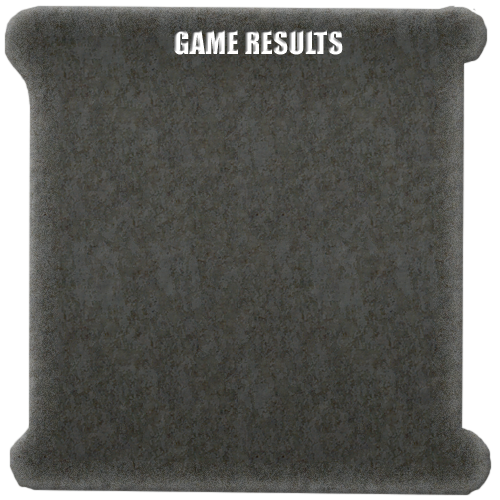
<style>
.page{position:relative;width:500px;height:500px}
.page>*{position:absolute;margin:0}
.t1{font:30px "Impact";color:#ffffff}
</style>
<div class="page">
<p class="t1" style="left:174px;top:29px;width:169px;height:26px">GAME RESULTS</p>
</div>
